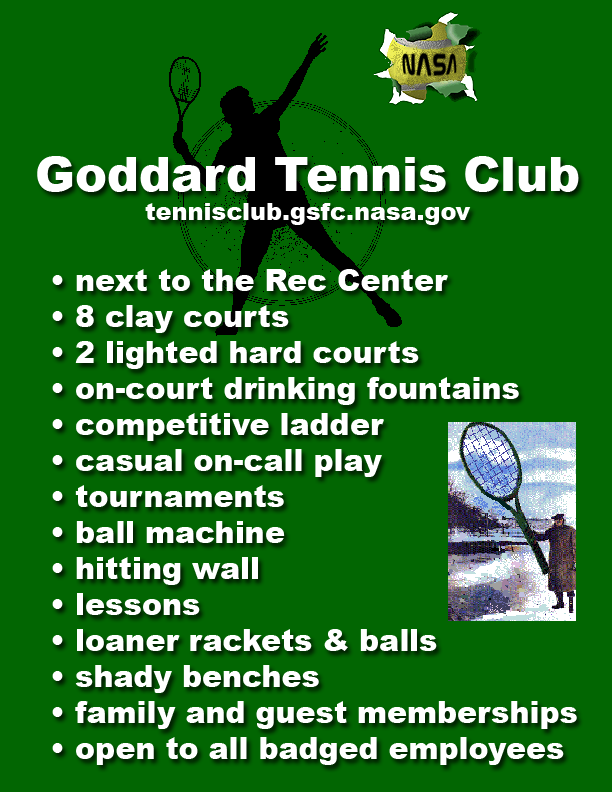
<style>
.page{position:relative;width:612px;height:792px;background:#026602}
.page>*{position:absolute;margin:0}
.t1{font:24px "Arial-Black";color:#ffffff}
.t2{font:48px "Arial-Black";color:#ffffff}
.t3{font:30px "Arial-Black";color:#ffffff}
</style>
<div class="page">
<p class="t1" style="left:37px;top:156px;width:542px;height:69px;text-align:center"><span class="t2">Goddard Tennis Club<br></span>tennisclub.gsfc.nasa.gov</p>
<p class="t3" style="left:52px;top:269px;width:525px;height:496px">• next to the Rec Center<br>• 8 clay courts<br>• 2 lighted hard courts<br>• on-court drinking fountains<br>• competitive ladder<br>• casual on-call play<br>• tournaments<br>• ball machine<br>• hitting wall<br>• lessons<br>• loaner rackets &amp; balls<br>• shady benches<br>• family and guest memberships<br>• open to all badged employees</p>
</div>
